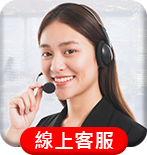
<style>
.page{position:relative;width:147px;height:155px}
.page>*{position:absolute;margin:0}
.t1{font:20px "MicrosoftJhengHeiBold";letter-spacing:0.01em;color:#ffffff}
</style>
<div class="page">
<p class="t1" style="left:35px;top:131px;width:79px;height:18px">線上客服</p>
</div>
